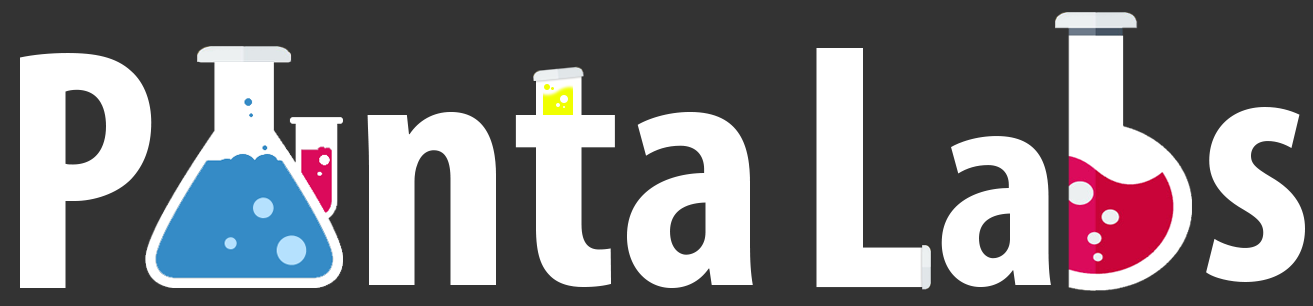
<style>
.page{position:relative;width:1313px;height:306px;background:#333333}
.page>*{position:absolute;margin:0}
.t1{font:347.2px "MyriadPro-BoldCond";color:#ffffff}
.t2{font:355.1px "MyriadPro-BoldCond";color:#ffffff}
.t3{font:300px "MyriadPro-BoldCond";color:#ffffff}
</style>
<div class="page">
<p class="t1" style="left:20px;top:53px;width:132px;height:235px">P</p>
<p class="t2" style="left:816px;top:48px;width:109px;height:240px">L</p>
<p class="t1" style="left:367px;top:69px;width:386px;height:219px">nta</p>
<p class="t1" style="left:1206px;top:107px;width:99px;height:175px">s</p>
<p class="t3" style="left:941px;top:136px;width:110px;height:151px">a</p>
</div>
